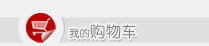
<style>
.page{position:relative;width:209px;height:46px;background:#f0f0f0}
.page>*{position:absolute;margin:0}
.t1{font:15.3px "YouYuan";letter-spacing:0.05em;color:#7f7f7f}
.t2{font:10.2px "YouYuan";letter-spacing:0.05em;color:#7f7f7f}
</style>
<div class="page">
<p class="t1" style="left:69px;top:24px;width:67px;height:15px"><span class="t2">我的</span>购物车</p>
</div>
